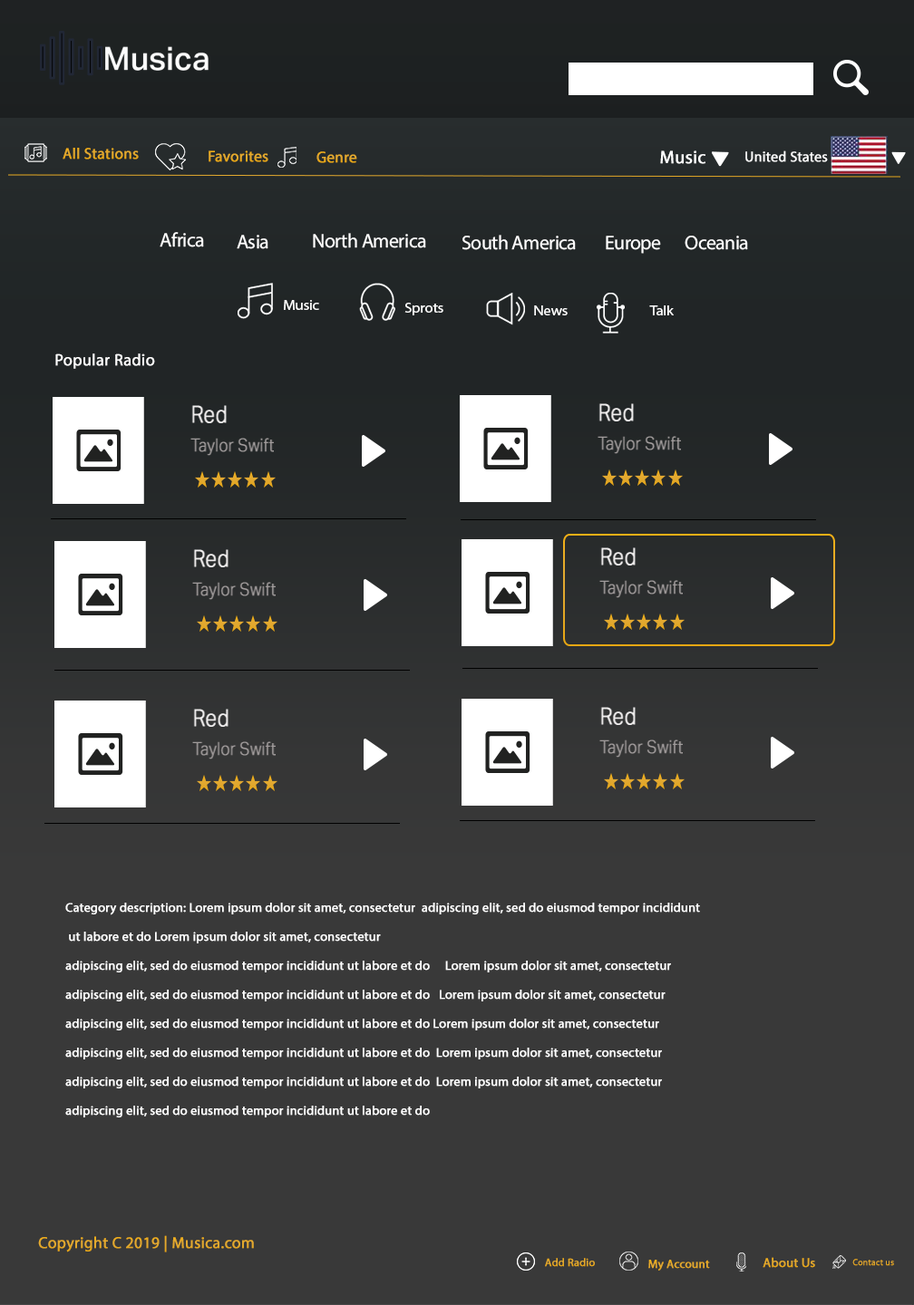
<style>
.page{position:relative;width:914px;height:1305px;background:#393939}
.page>*{position:absolute;margin:0}
.t1{font:32.2px "AktivGroteskTrial-Medium";color:#fcfcfc}
.t2{font:15.3px "MyriadPro-Regular";color:#e3a826;font-weight:bold}
.t3{font:15.3px "MyriadPro-Regular";color:#e4a82a;font-weight:bold}
.t4{font:15.3px "MyriadPro-Regular";color:#e3a82c;font-weight:bold}
.t5{font:18.1px "MyriadPro-Regular";color:#ffffff;font-weight:bold}
.t6{font:14.2px "MyriadPro-Regular";color:#ffffff;font-weight:bold}
.t7{font:19.7px "MyriadPro-Regular";letter-spacing:-0.025em;color:#ffffff}
.t8{font:19.7px "MyriadPro-Regular";letter-spacing:-0.025em;color:#fffefe}
.t9{font:19.7px "MyriadPro-Regular";letter-spacing:-0.025em;color:#fefefe}
.t10{font:13.9px "MyriadPro-Regular";letter-spacing:-0.025em;color:#ffffff;scale:1.11 1}
.t11{font:16.3px "MyriadPro-Regular";color:#ffffff;font-weight:bold}
.t12{font:18.1px/29px "AktivGroteskTrial-Light";color:#a19c9c;font-weight:bold;scale:0.85 1}
.t13{font:23.6px/29px "AktivGroteskTrial-Light";color:#f0eeee;font-weight:bold;scale:0.85 1}
.t14{font:12.7px/29px "MyriadPro-Regular";color:#ffffff;font-weight:bold}
.t15{font:15.9px "MyriadPro-Regular";color:#e3a82b;font-weight:bold}
.t16{font:11px "MyriadPro-Regular";color:#e3a826;font-weight:bold}
.t17{font:11.8px "MyriadPro-Regular";color:#e3a82c;font-weight:bold}
.t18{font:13px "MyriadPro-Regular";color:#e5a724;font-weight:bold}
.t19{font:8.9px "MyriadPro-Regular";color:#e2a82b;font-weight:bold}
</style>
<div class="page">
<p class="t1" style="left:105px;top:46px;width:103px;height:25px">Musica</p>
<p class="t2" style="left:63px;top:148px;width:76px;height:12px">All Stations</p>
<p class="t3" style="left:208px;top:150px;width:60px;height:12px">Favorites</p>
<p class="t4" style="left:316px;top:151px;width:41px;height:12px">Genre</p>
<p class="t5" style="left:660px;top:150px;width:45px;height:14px">Music</p>
<p class="t6" style="left:745px;top:150px;width:83px;height:12px">United States</p>
<p class="t7" style="left:160px;top:232px;width:44px;height:15px">Africa</p>
<p class="t7" style="left:313px;top:233px;width:113px;height:15px">North America</p>
<p class="t7" style="left:237px;top:235px;width:31px;height:14px">Asia</p>
<p class="t8" style="left:462px;top:235px;width:114px;height:15px">South America</p>
<p class="t7" style="left:605px;top:236px;width:56px;height:18px">Europe</p>
<p class="t9" style="left:684px;top:236px;width:64px;height:14px">Oceania</p>
<p class="t10" style="left:284px;top:300px;width:35px;height:10px">Music</p>
<p class="t10" style="left:404px;top:303px;width:39px;height:12px">Sprots</p>
<p class="t10" style="left:534px;top:305px;width:33px;height:10px">News</p>
<p class="t10" style="left:649px;top:305px;width:24px;height:10px">Talk</p>
<p class="t11" style="left:55px;top:353px;width:100px;height:16px">Popular Radio</p>
<p class="t12" style="left:190px;top:405px;width:84px;height:51px"><span class="t13">Red<br></span>Taylor Swift</p>
<p class="t12" style="left:597px;top:403px;width:84px;height:51px"><span class="t13">Red<br></span>Taylor Swift</p>
<p class="t12" style="left:192px;top:549px;width:84px;height:51px"><span class="t13">Red<br></span>Taylor Swift</p>
<p class="t12" style="left:599px;top:547px;width:83px;height:51px"><span class="t13">Red<br></span>Taylor Swift</p>
<p class="t12" style="left:192px;top:709px;width:84px;height:51px"><span class="t13">Red<br></span>Taylor Swift</p>
<p class="t12" style="left:599px;top:707px;width:83px;height:51px"><span class="t13">Red<br></span>Taylor Swift</p>
<p class="t14" style="left:65px;top:903px;width:635px;height:215px">Category description: Lorem ipsum dolor sit amet, consectetur  adipiscing elit, sed do eiusmod tempor incididunt<br> ut labore et do Lorem ipsum dolor sit amet, consectetur <br>adipiscing elit, sed do eiusmod tempor incididunt ut labore et do     Lorem ipsum dolor sit amet, consectetur <br>adipiscing elit, sed do eiusmod tempor incididunt ut labore et do   Lorem ipsum dolor sit amet, consectetur <br>adipiscing elit, sed do eiusmod tempor incididunt ut labore et do Lorem ipsum dolor sit amet, consectetur <br>adipiscing elit, sed do eiusmod tempor incididunt ut labore et do  Lorem ipsum dolor sit amet, consectetur <br>adipiscing elit, sed do eiusmod tempor incididunt ut labore et do  Lorem ipsum dolor sit amet, consectetur <br>adipiscing elit, sed do eiusmod tempor incididunt ut labore et do</p>
<p class="t15" style="left:38px;top:1235px;width:216px;height:18px">Copyright C 2019 | Musica.com</p>
<p class="t16" style="left:545px;top:1258px;width:50px;height:9px">Add Radio</p>
<p class="t17" style="left:648px;top:1260px;width:62px;height:11px">My Account</p>
<p class="t18" style="left:762px;top:1257px;width:53px;height:11px">About Us</p>
<p class="t19" style="left:852px;top:1259px;width:42px;height:7px">Contact us</p>
</div>
